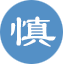
<style>
.page{position:relative;width:64px;height:64px;background:#5490c6}
.page>*{position:absolute;margin:0}
.t1{font:48px "LiSu";color:#fffffe}
</style>
<div class="page">
<p class="t1" style="left:10px;top:16px;width:46px;height:31px">慎</p>
</div>
